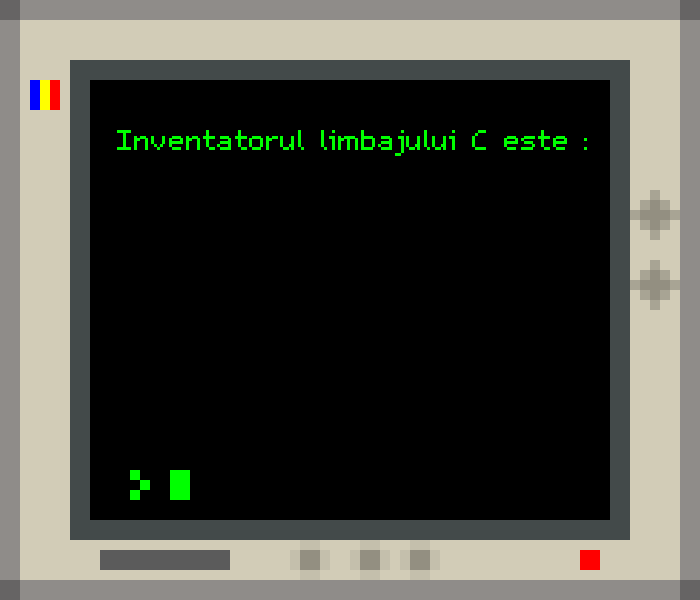
<style>
.page{position:relative;width:700px;height:600px;background:#000000}
.page>*{position:absolute;margin:0}
.t1{font:46.3px "m5x7";color:#00ff00}
</style>
<div class="page">
<p class="t1" style="left:117px;top:130px;width:470px;height:26px">Inventatorul limbajului C este :</p>
</div>
